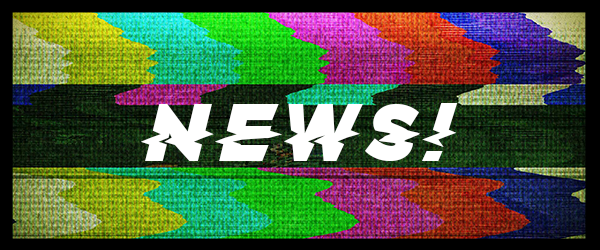
<style>
.page{position:relative;width:600px;height:250px}
.page>*{position:absolute;margin:0}
.t1{font:110px "PhelixBoomgartner-Regular";color:#ffffff}
</style>
<div class="page">
<p class="t1" style="left:141px;top:103px;width:317px;height:58px">NEWS!</p>
</div>
